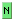
<style>
.page{position:relative;width:14px;height:21px;background:#ffffff}
.page>*{position:absolute;margin:0}
.t1{font:9px "Monaco";color:#000000}
</style>
<div class="page">
<p class="t1" style="left:4px;top:7px;width:5px;height:7px">N</p>
</div>
